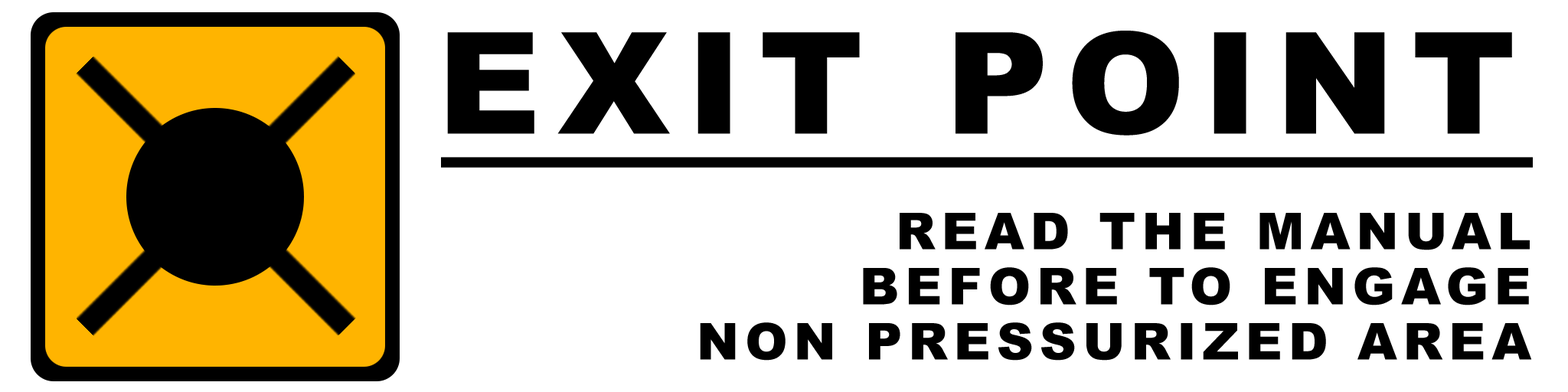
<style>
.page{position:relative;width:1568px;height:392px;background:#ffffff}
.page>*{position:absolute;margin:0}
.t1{font:141.3px "Arial-Black";letter-spacing:0.12em;color:#000000}
.t2{font:50.9px "Arial-Black";letter-spacing:0.12em;color:#000000}
</style>
<div class="page">
<p class="t1" style="left:447px;top:31px;width:1065px;height:105px">EXIT POINT</p>
<p class="t2" style="left:900px;top:213px;width:630px;height:37px">READ THE MANUAL</p>
<p class="t2" style="left:863px;top:267px;width:666px;height:38px">BEFORE TO ENGAGE</p>
<p class="t2" style="left:700px;top:322px;width:832px;height:39px">NON PRESSURIZED AREA</p>
</div>
